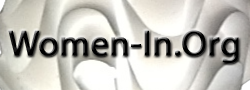
<style>
.page{position:relative;width:250px;height:90px}
.page>*{position:absolute;margin:0}
.t1{font:36px "MyriadPro-Regular";color:#000000;font-weight:bold}
</style>
<div class="page">
<p class="t1" style="left:8px;top:30px;width:231px;height:33px">Women-In.Org</p>
</div>
